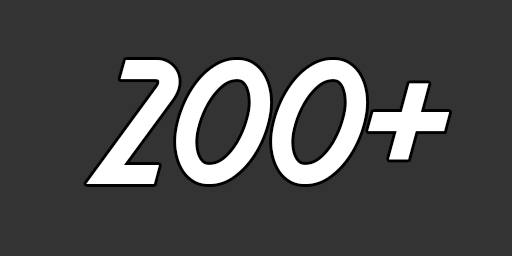
<style>
.page{position:relative;width:512px;height:256px;background:#333333}
.page>*{position:absolute;margin:0}
.t1{font:240px "AeroviasBrasilNF";color:#ffffff}
</style>
<div class="page">
<p class="t1" style="left:86px;top:60px;width:364px;height:124px">200+</p>
</div>
